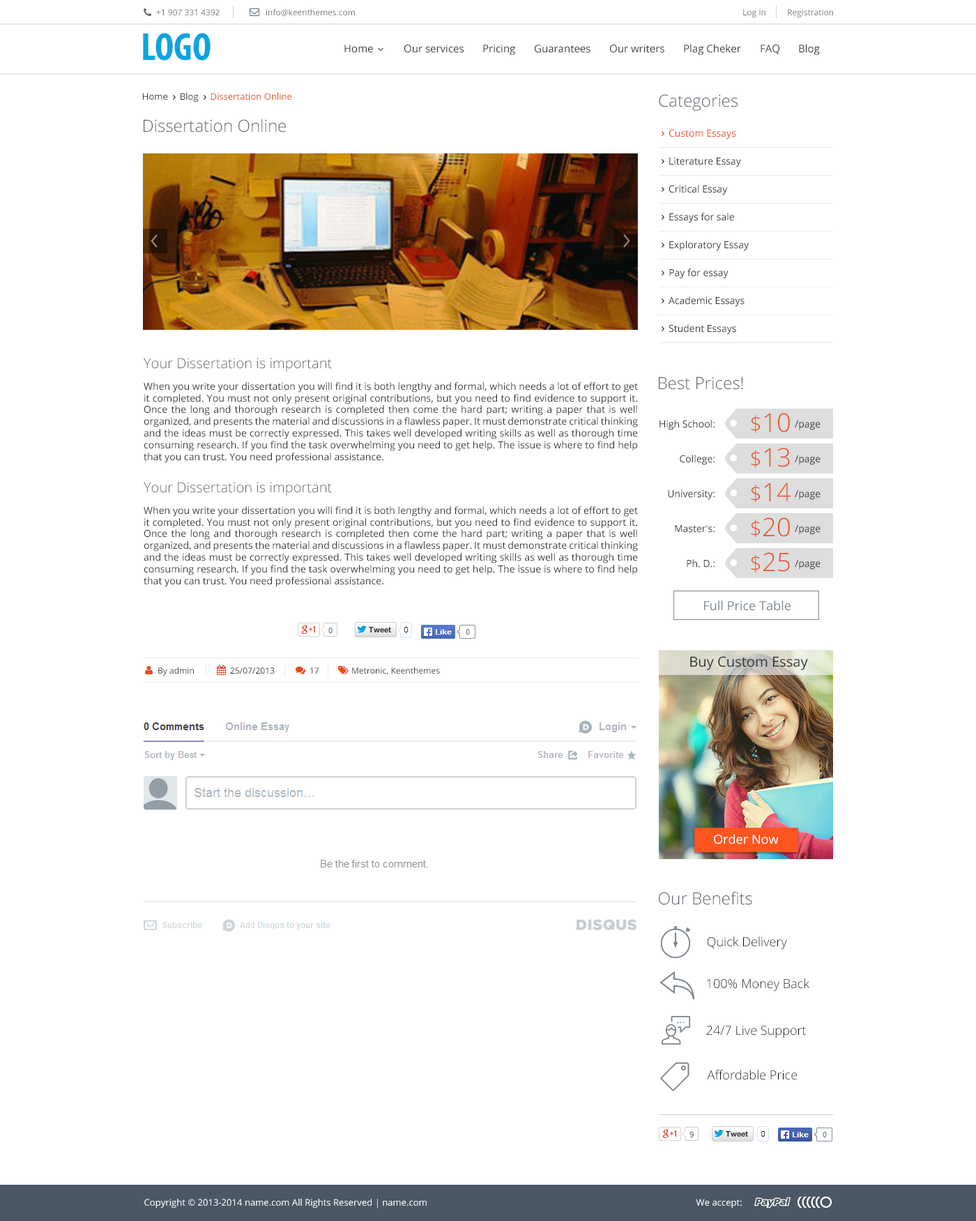
<style>
.page{position:relative;width:976px;height:1221px;background:#ffffff}
.page>*{position:absolute;margin:0}
.t1{font:8.4px "OpenSans";color:#737373}
.t2{font:39.4px "MyriadPro-BoldCond";color:#0da3e2}
.t3{font:10.5px "OpenSans";color:#333333}
.t4{font:9.1px "OpenSans";color:#e84d1c}
.t5{font:9.1px "OpenSans";color:#333333}
.t6{font:16.7px "OpenSans-Light";color:#5a5d66}
.t7{font:9.8px "OpenSans";color:#e84d1c}
.t8{font:9.8px "OpenSans";color:#333333}
.t9{font:13.9px "OpenSans-Light";color:#5a5d66}
.t10{font:25.4px "OpenSans-Light";color:#e84d1c}
.t11{font:21.7px "OpenSans-Light";color:#e84d1c}
.t12{font:12.6px "OpenSans";color:#7c858e}
.t13{font:8.4px "OpenSans";color:#333333}
.t14{font:8.4px "OpenSans"}
.t15{font:12.6px "OpenSans-Light";color:#000000}
</style>
<div class="page">
<p class="t1" style="left:156px;top:9px;width:64px;height:6px">+1 907 331 4392</p>
<p class="t1" style="left:266px;top:9px;width:89px;height:7px">info@keenthemes.com</p>
<p class="t1" style="left:743px;top:9px;width:23px;height:8px">Log In</p>
<p class="t1" style="left:788px;top:9px;width:45px;height:8px">Registration</p>
<p class="t2" style="left:143px;top:33px;width:68px;height:28px">LOGO</p>
<p class="t3" style="left:345px;top:45px;width:28px;height:8px">Home</p>
<p class="t3" style="left:405px;top:45px;width:59px;height:8px">Our services</p>
<p class="t3" style="left:483px;top:45px;width:32px;height:10px">Pricing</p>
<p class="t3" style="left:535px;top:45px;width:56px;height:8px">Guarantees</p>
<p class="t3" style="left:610px;top:45px;width:55px;height:8px">Our writers</p>
<p class="t3" style="left:684px;top:44px;width:57px;height:11px">Plag Cheker</p>
<p class="t3" style="left:761px;top:45px;width:19px;height:9px">FAQ</p>
<p class="t3" style="left:799px;top:44px;width:21px;height:11px">Blog</p>
<p class="t4" style="left:143px;top:93px;width:149px;height:9px"><span class="t5">Home     Blog</span>     Dissertation Online</p>
<p class="t6" style="left:659px;top:94px;width:80px;height:17px">Categories</p>
<p class="t6" style="left:144px;top:119px;width:142px;height:14px">Dissertation Online</p>
<p class="t7" style="left:669px;top:129px;width:68px;height:10px">Custom Essays</p>
<p class="t8" style="left:670px;top:157px;width:71px;height:10px">Literature Essay</p>
<p class="t8" style="left:669px;top:185px;width:59px;height:10px">Critical Essay</p>
<p class="t8" style="left:670px;top:213px;width:64px;height:10px">Essays for sale</p>
<p class="t8" style="left:670px;top:241px;width:79px;height:10px">Exploratory Essay</p>
<p class="t8" style="left:670px;top:269px;width:59px;height:10px">Pay for essay</p>
<p class="t8" style="left:669px;top:296px;width:76px;height:11px">Academic Essays</p>
<p class="t8" style="left:669px;top:324px;width:68px;height:11px">Student Essays</p>
<p class="t9" style="left:144px;top:358px;width:188px;height:14px">Your Dissertation is important</p>
<p class="t6" style="left:659px;top:377px;width:84px;height:13px">Best Prices!</p>
<p class="t8" style="left:144px;top:382px;width:494px;height:81px;text-align:justify">When you write your dissertation you will find it is both lengthy and formal, which needs a lot of effort to get it completed. You must not only present original contributions, but you need to find evidence to support it. Once the long and thorough research is completed then come the hard part; writing a paper that is well organized, and presents the material and discussions in a flawless paper. It must demonstrate critical thinking and the ideas must be correctly expressed. This takes well developed writing skills as well as thorough time consuming research. If you find the task overwhelming you need to get help. The issue is where to find help that you can trust. You need professional assistance.</p>
<p class="t10" style="left:751px;top:413px;width:39px;height:20px"><span class="t11">$</span>10</p>
<p class="t8" style="left:660px;top:420px;width:55px;height:10px">High School:</p>
<p class="t8" style="left:795px;top:421px;width:26px;height:9px">/page</p>
<p class="t10" style="left:751px;top:448px;width:39px;height:20px"><span class="t11">$</span>13</p>
<p class="t8" style="left:680px;top:455px;width:35px;height:10px">College:</p>
<p class="t8" style="left:795px;top:455px;width:26px;height:10px">/page</p>
<p class="t9" style="left:144px;top:482px;width:188px;height:14px">Your Dissertation is important</p>
<p class="t10" style="left:751px;top:483px;width:41px;height:20px"><span class="t11">$</span>14</p>
<p class="t8" style="left:668px;top:490px;width:47px;height:10px">University:</p>
<p class="t8" style="left:795px;top:490px;width:26px;height:10px">/page</p>
<p class="t8" style="left:144px;top:506px;width:494px;height:81px;text-align:justify">When you write your dissertation you will find it is both lengthy and formal, which needs a lot of effort to get it completed. You must not only present original contributions, but you need to find evidence to support it. Once the long and thorough research is completed then come the hard part; writing a paper that is well organized, and presents the material and discussions in a flawless paper. It must demonstrate critical thinking and the ideas must be correctly expressed. This takes well developed writing skills as well as thorough time consuming research. If you find the task overwhelming you need to get help. The issue is where to find help that you can trust. You need professional assistance.</p>
<p class="t10" style="left:751px;top:518px;width:39px;height:20px"><span class="t11">$</span>20</p>
<p class="t8" style="left:675px;top:525px;width:40px;height:8px">Master's:</p>
<p class="t8" style="left:795px;top:525px;width:26px;height:10px">/page</p>
<p class="t10" style="left:751px;top:552px;width:39px;height:21px"><span class="t11">$</span>25</p>
<p class="t8" style="left:687px;top:559px;width:28px;height:9px">Ph. D.:</p>
<p class="t8" style="left:795px;top:560px;width:26px;height:10px">/page</p>
<p class="t12" style="left:704px;top:600px;width:87px;height:11px">Full Price Table</p>
<p class="t13" style="left:158px;top:667px;width:36px;height:9px">By admin</p>
<p class="t13" style="left:230px;top:667px;width:45px;height:7px">25/07/2013</p>
<p class="t14" style="left:310px;top:667px;width:9px;height:7px">17</p>
<p class="t13" style="left:352px;top:667px;width:88px;height:8px">Metronic, Keenthemes</p>
<p class="t6" style="left:659px;top:891px;width:94px;height:14px">Our Benefits</p>
<p class="t15" style="left:707px;top:937px;width:80px;height:13px">Quick Delivery</p>
<p class="t15" style="left:707px;top:979px;width:103px;height:13px">100% Money Back</p>
<p class="t15" style="left:707px;top:1026px;width:99px;height:12px">24/7 Live Support</p>
<p class="t15" style="left:707px;top:1070px;width:90px;height:10px">Affordable Price</p>
</div>
